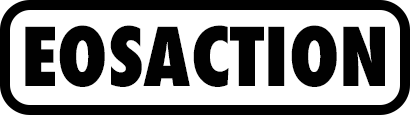
<style>
.page{position:relative;width:410px;height:115px;background:#ffffff}
.page>*{position:absolute;margin:0}
.t1{font:78.7px "Futura-CondensedExtraBold";color:#010101}
</style>
<div class="page">
<p class="t1" style="left:25px;top:25px;width:360px;height:62px">EOSACTION</p>
</div>
